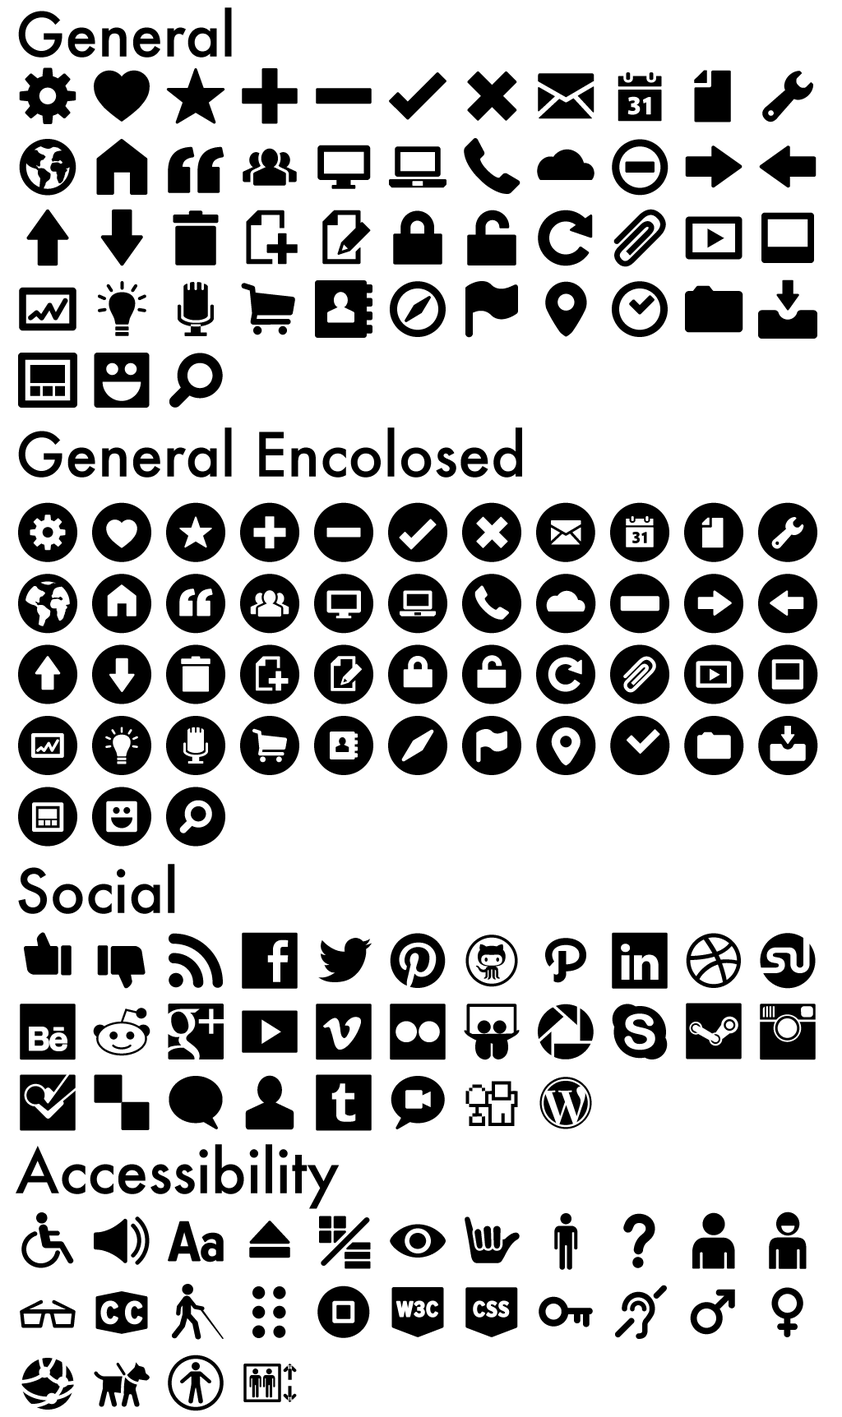
<style>
.page{position:relative;width:842px;height:1417px;background:#ffffff}
.page>*{position:absolute;margin:0}
.t1{font:59.2px "Futura-Medium";color:#000000}
</style>
<div class="page">
<p class="t1" style="left:18px;top:7px;width:214px;height:51px">General</p>
<p class="t1" style="left:18px;top:427px;width:504px;height:51px">General Encolosed</p>
<p class="t1" style="left:18px;top:864px;width:157px;height:50px">Social</p>
<p class="t1" style="left:16px;top:1144px;width:323px;height:65px">Accessibility</p>
</div>
